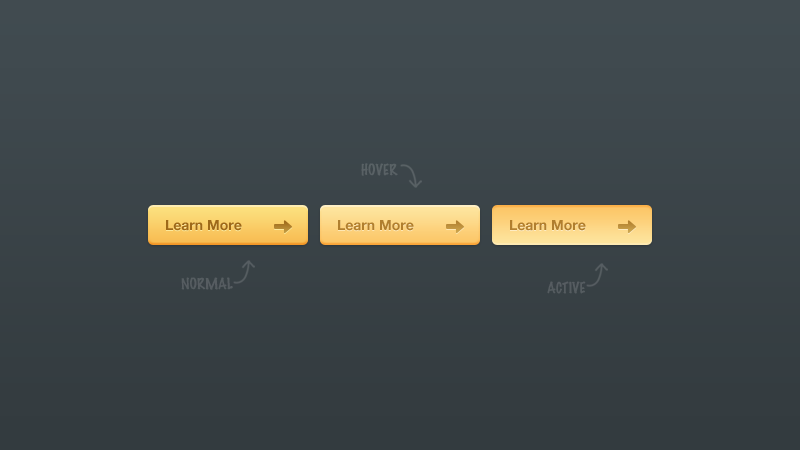
<style>
.page{position:relative;width:800px;height:450px}
.page>*{position:absolute;margin:0}
.t1{font:14px "HelveticaNeue-Bold";color:#9e6919}
.t2{font:14px "HelveticaNeue-Bold";color:#b17f2e}
</style>
<div class="page">
<p class="t1" style="left:166px;top:220px;width:76px;height:11px">Learn More</p>
<p class="t2" style="left:338px;top:220px;width:76px;height:11px">Learn More</p>
<p class="t2" style="left:510px;top:220px;width:76px;height:11px">Learn More</p>
</div>
